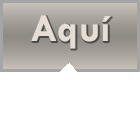
<style>
.page{position:relative;width:140px;height:140px;background:#ffffff}
.page>*{position:absolute;margin:0}
.t1{font:40px "TwCenMT-Bold";color:#e6ded5}
</style>
<div class="page">
<p class="t1" style="left:31px;top:15px;width:80px;height:34px">Aquí</p>
</div>
